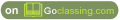
<style>
.page{position:relative;width:120px;height:20px;background:#7c915e}
.page>*{position:absolute;margin:0}
.t1{font:11px "Arial-BoldMT";color:#fefefe}
.t2{font:9.6px "ArialMT";color:#b8db40;scale:1.03 1}
.t3{font:9.6px "ArialMT";color:#fefefc;scale:1.03 1}
</style>
<div class="page">
<p class="t1" style="left:5px;top:8px;width:13px;height:6px">on</p>
<p class="t2" style="left:44px;top:7px;width:70px;height:9px"><span class="t3">Go</span>classing.com</p>
</div>
